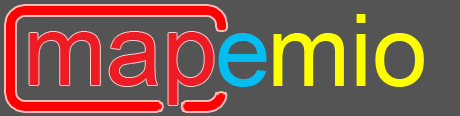
<style>
.page{position:relative;width:460px;height:116px;background:#545454}
.page>*{position:absolute;margin:0}
.t1{font:100px "ArialMT";color:#ffff00}
.t2{font:100px "ArialMT";color:#ed1c24}
.t3{font:100px "ArialMT";color:#00bff3}
</style>
<div class="page">
<p class="t1" style="left:356px;top:14px;width:10px;height:72px">i</p>
<p class="t2" style="left:29px;top:32px;width:185px;height:73px">map</p>
<p class="t3" style="left:218px;top:33px;width:49px;height:54px">e</p>
<p class="t1" style="left:273px;top:33px;width:71px;height:53px">m</p>
<p class="t1" style="left:375px;top:33px;width:49px;height:54px">o</p>
</div>
